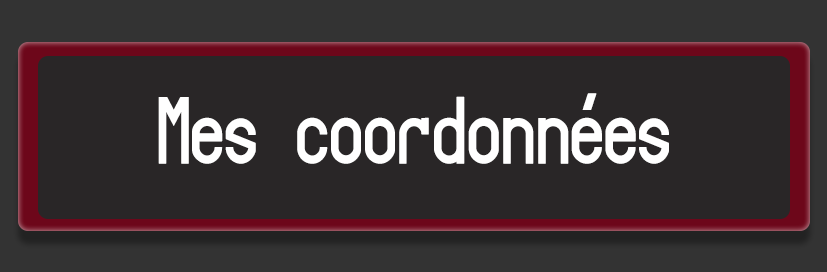
<style>
.page{position:relative;width:827px;height:272px;background:#292627}
.page>*{position:absolute;margin:0}
.t1{font:83.3px "Targa";color:#ffffff;scale:0.9 1}
</style>
<div class="page">
<p class="t1" style="left:158px;top:93px;width:511px;height:71px">Mes coordonnées</p>
</div>
